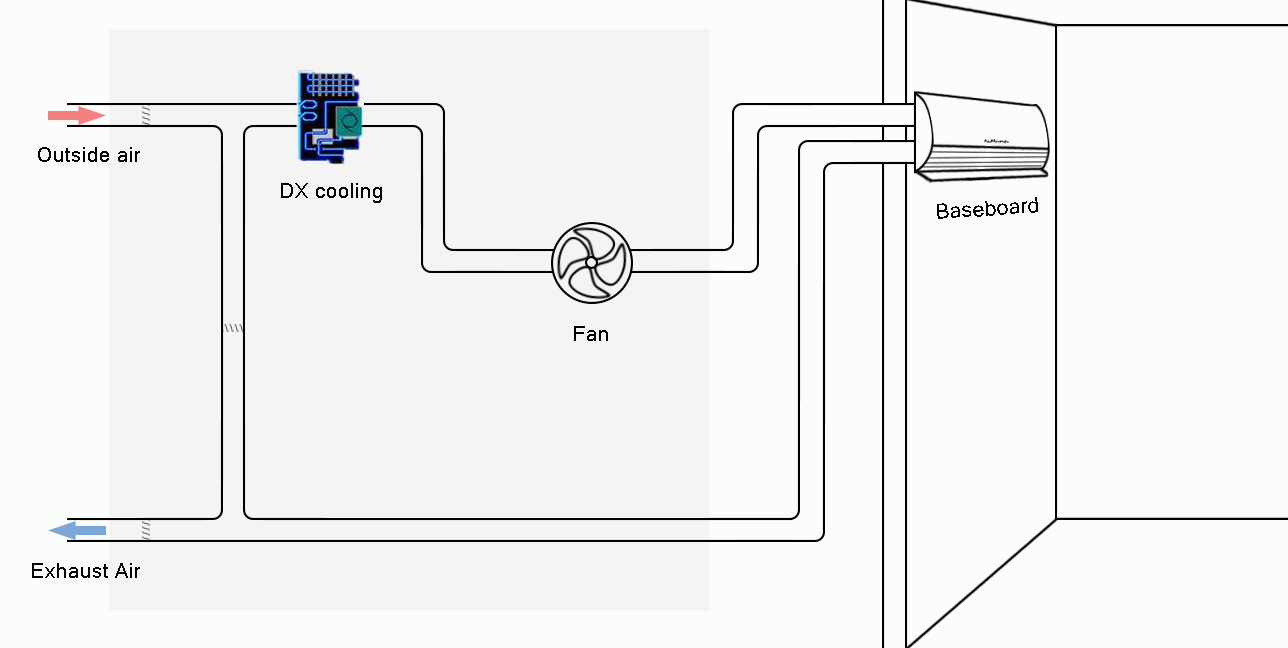
<style>
.page{position:relative;width:1288px;height:648px;background:#fbfcfc}
.page>*{position:absolute;margin:0}
.t1{font:20.8px "MicrosoftSansSerif";color:#000000}
</style>
<div class="page">
<p class="t1" style="left:38px;top:147px;width:102px;height:15px">Outside air</p>
<p class="t1" style="left:281px;top:183px;width:101px;height:20px">DX cooling</p>
<p class="t1" style="left:937px;top:197px;width:101px;height:22px;rotate:-4deg">Baseboard</p>
<p class="t1" style="left:574px;top:326px;width:34px;height:15px">Fan</p>
</div>
